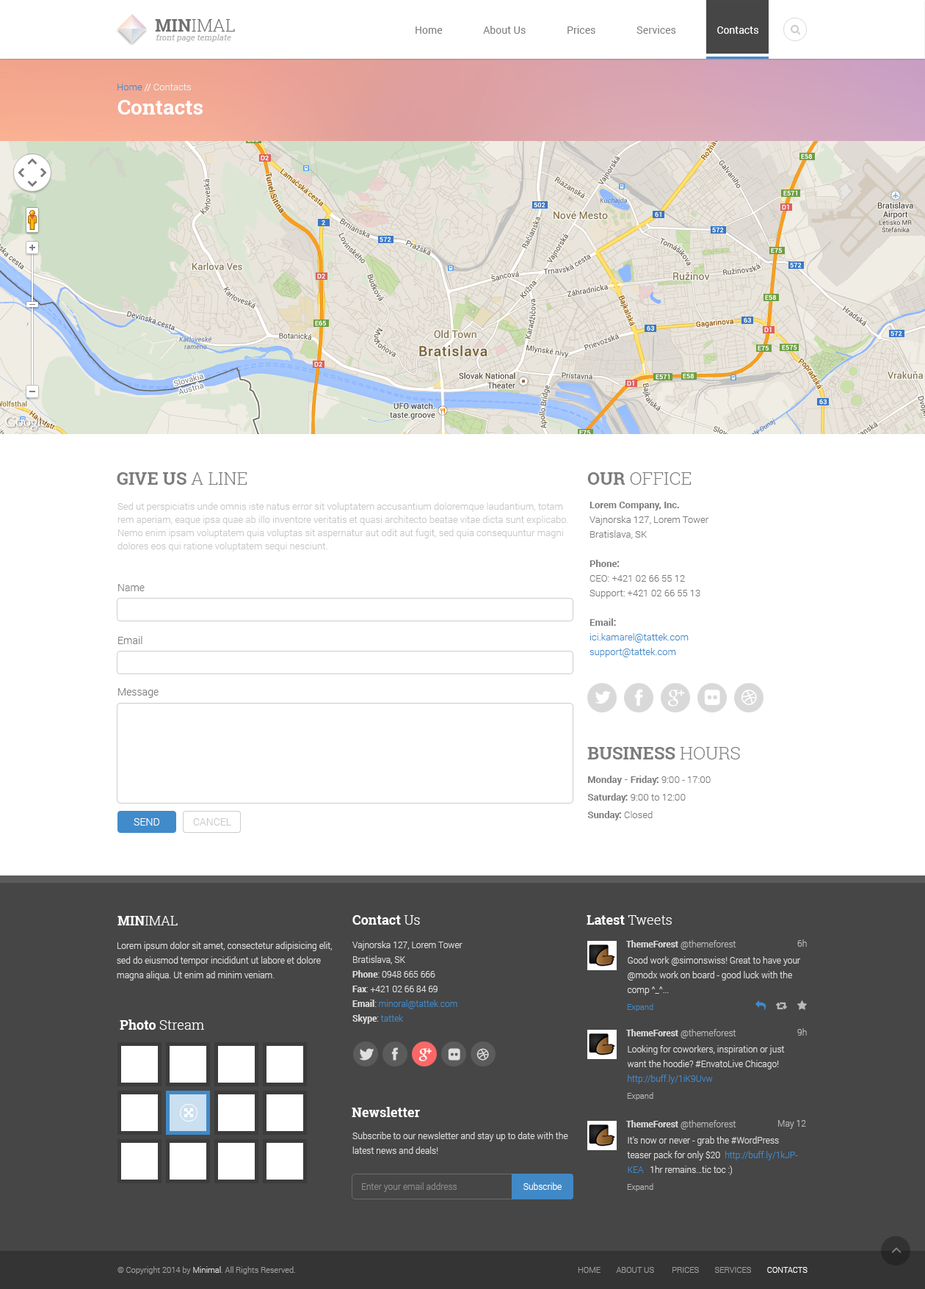
<style>
.page{position:relative;width:925px;height:1289px;background:#ffffff}
.page>*{position:absolute;margin:0}
.t1{font:17.6px "RobotoSlab-Light";color:#717171;text-transform:uppercase}
.t2{font:17.6px "RobotoSlab-Bold";color:#717171;text-transform:uppercase}
.t3{font:10.3px "Roboto-Regular";color:#7c7c7c}
.t4{font:10.3px "Roboto-Regular";color:#ffffff}
.t5{font:8.1px "RobotoSlab-Regular";color:#b1b1b1;font-style:italic}
.t6{font:9.5px "Roboto-Light";color:#eeeeee}
.t7{font:9.5px "Roboto-Light";color:#418bca}
.t8{font:9.5px "Roboto-Light";color:#ffffff}
.t9{font:20.6px "RobotoSlab-Bold";color:#ffffff}
.t10{font:17.6px "RobotoSlab-Bold";color:#7c7c7c}
.t11{font:17.6px "RobotoSlab-Light";color:#7c7c7c}
.t12{font:9.5px/13.2px "Roboto-Light";color:#c7c7c7}
.t13{font:9.5px/14.7px "Roboto-Light";color:#7c7c7c}
.t14{font:9.5px/13.2px "Roboto-Bold";color:#7c7c7c}
.t15{font:9.5px/14.7px "Roboto-Bold";color:#7c7c7c}
.t16{font:9.5px/14.7px "Roboto-Light";color:#418bca}
.t17{font:10.3px "Roboto-Light";color:#7c7c7c}
.t18{font:9.5px/17.6px "Roboto-Bold";color:#7c7c7c}
.t19{font:9.5px/17.6px "Roboto-Light";color:#7c7c7c}
.t20{font:10.3px "Roboto-Light";color:#ffffff}
.t21{font:10.3px "Roboto-Light";color:#c7c7c7}
.t22{font:13.2px "RobotoSlab-Light";color:#ffffff}
.t23{font:13.2px "RobotoSlab-Bold";color:#ffffff}
.t24{font:8.8px/14.7px "Roboto-Light";color:#dfdfdf}
.t25{font:8.8px/14.7px "Roboto-Bold";color:#dfdfdf}
.t26{font:8.8px/14.7px "Roboto-Light";color:#4189c6}
.t27{font:8.8px "Roboto-Light";color:#b9b9b9}
.t28{font:8.8px "Roboto-Bold";color:#dfdfdf}
.t29{font:8.1px "Roboto-Light";color:#4189c6}
.t30{font:8.1px "Roboto-Light";color:#b6b6b6}
.t31{font:8.8px "Roboto-Light";color:#8c8c8c}
.t32{font:8.8px "Roboto-Light";color:#ffffff}
.t33{font:8.1px "Roboto-Light";color:#9d9d9d}
.t34{font:8.1px "Roboto-Light";color:#d9d9d9}
.t35{font:8.1px "Roboto-Light";color:#ffffff}
</style>
<div class="page">
<p class="t1" style="left:155px;top:19px;width:80px;height:13px"><span class="t2">MIN</span>IMAL</p>
<p class="t3" style="left:416px;top:26px;width:343px;height:8px">Home                About Us                Prices                Services                <span class="t4">Contacts</span></p>
<p class="t5" style="left:156px;top:35px;width:75px;height:7px">front page template</p>
<p class="t6" style="left:117px;top:84px;width:74px;height:7px"><span class="t7">Home </span><span class="t8">// </span>Contacts</p>
<p class="t9" style="left:117px;top:100px;width:86px;height:15px">Contacts</p>
<p class="t10" style="left:117px;top:472px;width:130px;height:13px">GIVE US<span class="t11"> A LINE</span></p>
<p class="t11" style="left:587px;top:472px;width:105px;height:13px"><span class="t10">OUR </span>OFFICE</p>
<p class="t12" style="left:117px;top:502px;width:451px;height:49px">Sed ut perspiciatis unde omnis iste natus error sit voluptatem accusantium doloremque laudantium, totam rem aperiam, eaque ipsa quae ab illo inventore veritatis et quasi architecto beatae vitae dicta sunt explicabo. Nemo enim ipsam voluptatem quia voluptas sit aspernatur aut odit aut fugit, sed quia consequuntur magni dolores eos qui ratione voluptatem sequi nesciunt.</p>
<p class="t13" style="left:590px;top:502px;width:119px;height:155px"><span class="t14">Lorem Company, Inc.<br></span>Vajnorska 127, Lorem Tower<br>Bratislava, SK<br><br><span class="t15">Phone:<br></span>CEO: +421 02 66 55 12<br>Support: +421 02 66 55 13<br><br><span class="t15">Email:<br></span><span class="t16">ici.kamarel@tattek.com<br>support@tattek.com</span></p>
<p class="t17" style="left:118px;top:584px;width:27px;height:7px">Name</p>
<p class="t17" style="left:118px;top:636px;width:24px;height:8px">Email</p>
<p class="t17" style="left:118px;top:688px;width:41px;height:10px">Message</p>
<p class="t10" style="left:587px;top:747px;width:153px;height:12px">BUSINESS <span class="t11">HOURS</span></p>
<p class="t18" style="left:587px;top:775px;width:124px;height:45px">Monday - Friday: <span class="t19">9:00 - 17:00<br></span> Saturday: <span class="t19">9:00 to 12:00<br></span> Sunday: <span class="t19">Closed</span></p>
<p class="t20" style="left:134px;top:818px;width:25px;height:7px">SEND</p>
<p class="t21" style="left:193px;top:818px;width:38px;height:7px">CANCEL</p>
<p class="t22" style="left:117px;top:916px;width:61px;height:9px"><span class="t23">MIN</span>IMAL</p>
<p class="t23" style="left:352px;top:915px;width:68px;height:10px">Contact <span class="t22">Us</span></p>
<p class="t23" style="left:587px;top:915px;width:85px;height:10px">Latest <span class="t22">Tweets</span></p>
<p class="t24" style="left:117px;top:941px;width:215px;height:39px">Lorem ipsum dolor sit amet, consectetur adipisicing elit, sed do eiusmod tempor incididunt ut labore et dolore magna aliqua. Ut enim ad minim veniam.</p>
<p class="t24" style="left:352px;top:941px;width:111px;height:83px">Vajnorska 127, Lorem Tower<br>Bratislava, SK<br><span class="t25">Phone</span>: 0948 665 666<br><span class="t25">Fax</span>: +421 02 66 84 69<br><span class="t25">Email</span>: <span class="t26">minoral@tattek.com<br></span><span class="t25">Skype</span>: <span class="t26">tattek</span></p>
<p class="t27" style="left:626px;top:940px;width:111px;height:9px"><span class="t28">ThemeForest </span>@themeforest</p>
<p class="t27" style="left:797px;top:939px;width:10px;height:8px">6h</p>
<p class="t24" style="left:627px;top:956px;width:174px;height:39px">Good work @simonswiss! Great to have your @modx work on board - good luck with the comp ^_^...<br>^Dan</p>
<p class="t29" style="left:627px;top:1003px;width:27px;height:8px">Expand</p>
<p class="t22" style="left:120px;top:1019px;width:84px;height:11px"><span class="t23">Photo </span>Stream</p>
<p class="t27" style="left:626px;top:1029px;width:111px;height:9px"><span class="t28">ThemeForest </span>@themeforest</p>
<p class="t27" style="left:797px;top:1028px;width:10px;height:7px">9h</p>
<p class="t24" style="left:627px;top:1045px;width:158px;height:39px">Looking for coworkers, inspiration or just want the hoodie? #EnvatoLive Chicago! <span class="t26">http://buff.ly/1iK9Uvw<br></span>^Dan</p>
<p class="t30" style="left:627px;top:1092px;width:27px;height:8px">Expand</p>
<p class="t23" style="left:352px;top:1107px;width:68px;height:10px">Newsletter</p>
<p class="t27" style="left:626px;top:1120px;width:111px;height:9px"><span class="t28">ThemeForest </span>@themeforest</p>
<p class="t27" style="left:778px;top:1120px;width:28px;height:9px">May 12</p>
<p class="t24" style="left:352px;top:1132px;width:216px;height:22px">Subscribe to our newsletter and stay up to date with the latest news and deals!</p>
<p class="t24" style="left:627px;top:1136px;width:171px;height:39px">It's now or never - grab the #WordPress teaser pack for only $20  <span class="t26">http://buff.ly/1kJPKEA</span>   1hr remains…tic toc :)<br>^Dan</p>
<p class="t31" style="left:362px;top:1182px;width:95px;height:10px">Enter your email address</p>
<p class="t32" style="left:524px;top:1182px;width:38px;height:8px">Subscribe</p>
<p class="t30" style="left:627px;top:1183px;width:27px;height:8px">Expand</p>
<p class="t33" style="left:117px;top:1266px;width:178px;height:8px">© Copyright 2014 by <span class="t34">Minimal</span>. All Rights Reserved.</p>
<p class="t33" style="left:578px;top:1267px;width:230px;height:6px">HOME        ABOUT US         PRICES        SERVICES        <span class="t35">CONTACTS</span></p>
</div>
